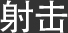
<style>
.page{position:relative;width:68px;height:33px;background:#333333}
.page>*{position:absolute;margin:0}
.t1{font:35.4px "AdobeHeitiStd-Regular";color:#ffffff}
</style>
<div class="page">
<p class="t1" style="left:0px;top:0px;width:68px;height:33px">射击</p>
</div>
